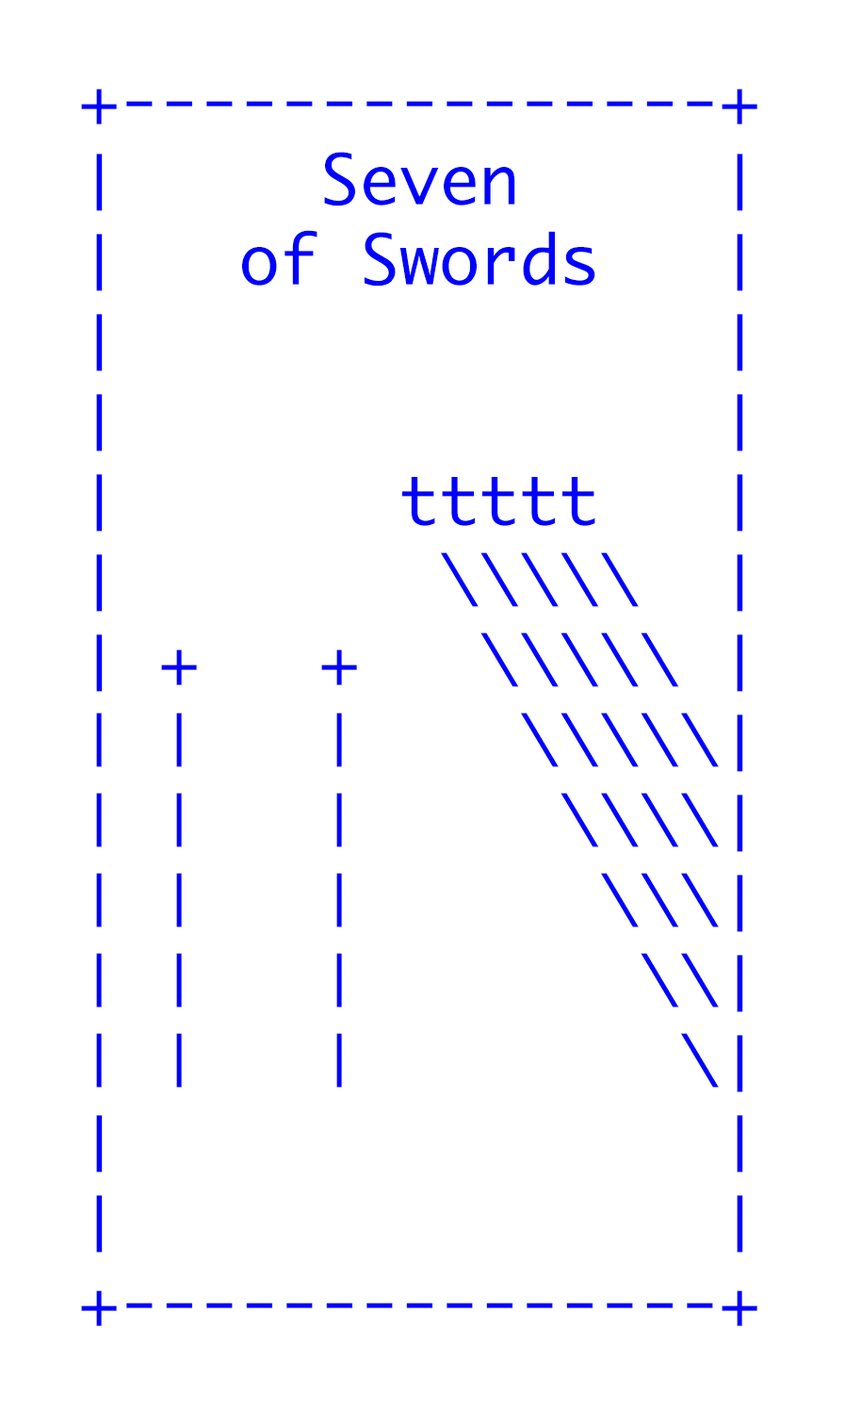
<style>
.page{position:relative;width:845px;height:1411px;background:#ffffff}
.page>*{position:absolute;margin:0}
.t1{font:66.7px "Monaco";color:#0000ff}
</style>
<div class="page">
<p class="t1" style="left:81px;top:89px;width:677px;height:1237px">+---------------+<br>│     Seven     │<br>│   of Swords   │<br>│               │<br>│               │<br>│       ttttt   │<br>│        \\\\\  │<br>│ +   +   \\\\\ │ <br>| |   |    \\\\\│ <br>| |   |     \\\\│<br>| |   |      \\\│ <br>| |   |       \\│ <br>| |   |        \│<br>│               │<br>│               │<br>+---------------+</p>
</div>
